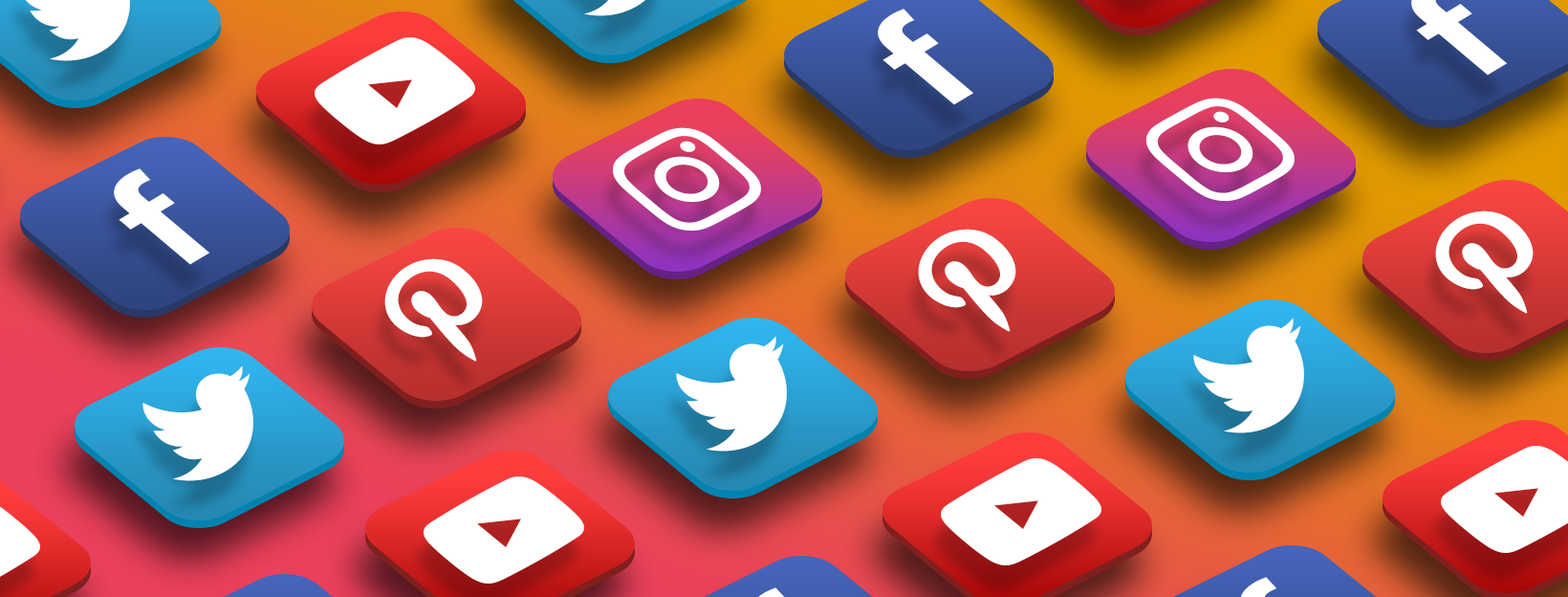
<style>
.page{position:relative;width:1568px;height:597px}
.page>*{position:absolute;margin:0}
.t1{font:149.7px "Roboto-Bold";color:#ffffff;scale:1.05 1}
</style>
<div class="page">
<p class="t1" style="left:878px;top:9px;width:96px;height:96px;rotate:-31deg">f</p>
<p class="t1" style="left:114px;top:168px;width:96px;height:97px;rotate:-31deg">f</p>
</div>
